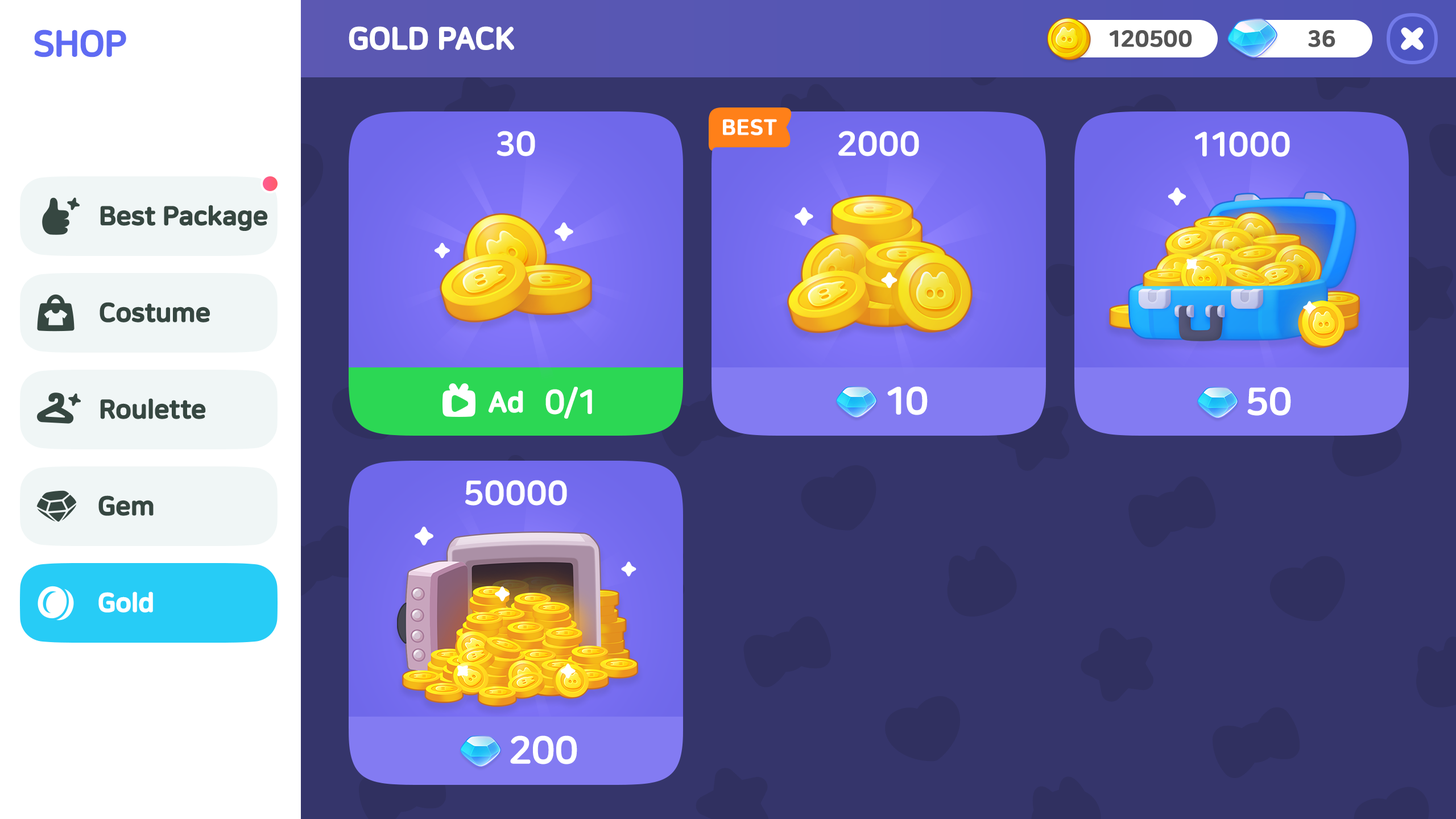
<style>
.page{position:relative;width:1456px;height:819px;background:#35356b}
.page>*{position:absolute;margin:0}
.t1{font:36.4px "NanumSquareRoundOTFEB";letter-spacing:-0.03em;color:#5f6bf3;font-weight:bold}
.t2{font:30.7px "NanumSquareRoundOTFEB";letter-spacing:-0.02em;color:#ffffff;text-transform:uppercase;font-weight:bold}
.t3{font:22.7px "NanumSquareRoundOTFEB";color:#555555;font-weight:bold}
.t4{font:21.6px "NanumSquareRoundOTFEB";letter-spacing:0.01em;color:#ffffff;text-transform:uppercase;font-weight:bold}
.t5{font:34.1px "NanumSquareRoundOTFEB";color:#ffffff}
.t6{font:26.2px "NanumSquareRoundOTFEB";letter-spacing:-0.02em;color:#364741;font-weight:bold}
.t7{font:38.7px "NanumSquareRoundOTFEB";color:#ffffff;text-transform:uppercase}
.t8{font:28.4px "NanumSquareRoundEB";letter-spacing:-0.02em;color:#ffffff;font-weight:bold}
.t9{font:26.2px "NanumSquareRoundOTFEB";letter-spacing:-0.02em;color:#ffffff;font-weight:bold}
</style>
<div class="page">
<p class="t1" style="left:34px;top:30px;width:92px;height:27px">SHOP</p>
<p class="t2" style="left:349px;top:26px;width:165px;height:24px">Gold Pack</p>
<p class="t3" style="left:1110px;top:30px;width:82px;height:17px">120500</p>
<p class="t3" style="left:1308px;top:30px;width:27px;height:17px">36</p>
<p class="t4" style="left:723px;top:119px;width:54px;height:16px">best</p>
<p class="t5" style="left:497px;top:131px;width:38px;height:25px">30</p>
<p class="t5" style="left:838px;top:131px;width:81px;height:25px">2000</p>
<p class="t5" style="left:1195px;top:131px;width:95px;height:26px">11000</p>
<p class="t6" style="left:100px;top:205px;width:168px;height:26px">Best Package</p>
<p class="t6" style="left:100px;top:302px;width:110px;height:20px">Costume</p>
<p class="t5" style="left:545px;top:387px;width:47px;height:32px">0/1</p>
<p class="t7" style="left:887px;top:386px;width:41px;height:29px">10</p>
<p class="t7" style="left:1247px;top:387px;width:44px;height:29px">50</p>
<p class="t6" style="left:100px;top:398px;width:106px;height:21px">Roulette</p>
<p class="t8" style="left:488px;top:390px;width:35px;height:23px">Ad</p>
<p class="t5" style="left:465px;top:480px;width:102px;height:26px">50000</p>
<p class="t6" style="left:98px;top:495px;width:56px;height:21px">Gem</p>
<p class="t9" style="left:98px;top:591px;width:55px;height:22px">Gold</p>
<p class="t7" style="left:510px;top:735px;width:67px;height:29px">200</p>
</div>
